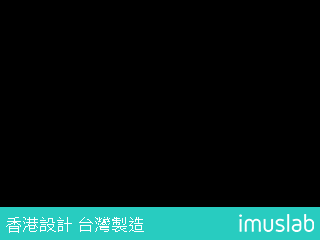
<style>
.page{position:relative;width:320px;height:240px;background:#000000}
.page>*{position:absolute;margin:0}
.t1{font:16.7px "NotoSansTC-Light";color:#ffffff}
</style>
<div class="page">
<p class="t1" style="left:6px;top:217px;width:138px;height:16px">香港設計 台灣製造</p>
</div>
